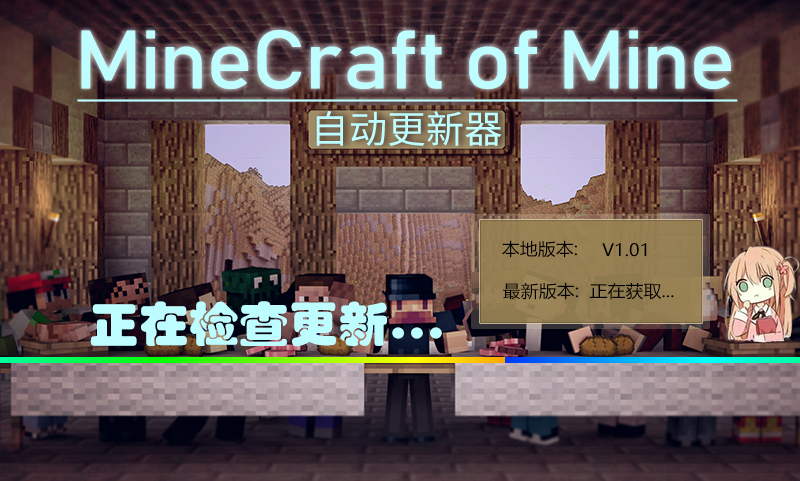
<style>
.page{position:relative;width:800px;height:481px}
.page>*{position:absolute;margin:0}
.t1{font:17.1px "MicrosoftYaHei";color:#000000;scale:1.05 1}
.t2{font:47.5px "STHupo";color:#befdff;scale:1.05 1}
</style>
<div class="page">
<p class="t1" style="left:502px;top:240px;width:75px;height:18px">本地版本:</p>
<p class="t1" style="left:602px;top:243px;width:45px;height:14px">V1.01</p>
<p class="t1" style="left:503px;top:282px;width:75px;height:18px">最新版本:</p>
<p class="t1" style="left:589px;top:283px;width:85px;height:17px">正在获取...</p>
<p class="t2" style="left:90px;top:301px;width:352px;height:46px">正在检查更新...</p>
</div>
